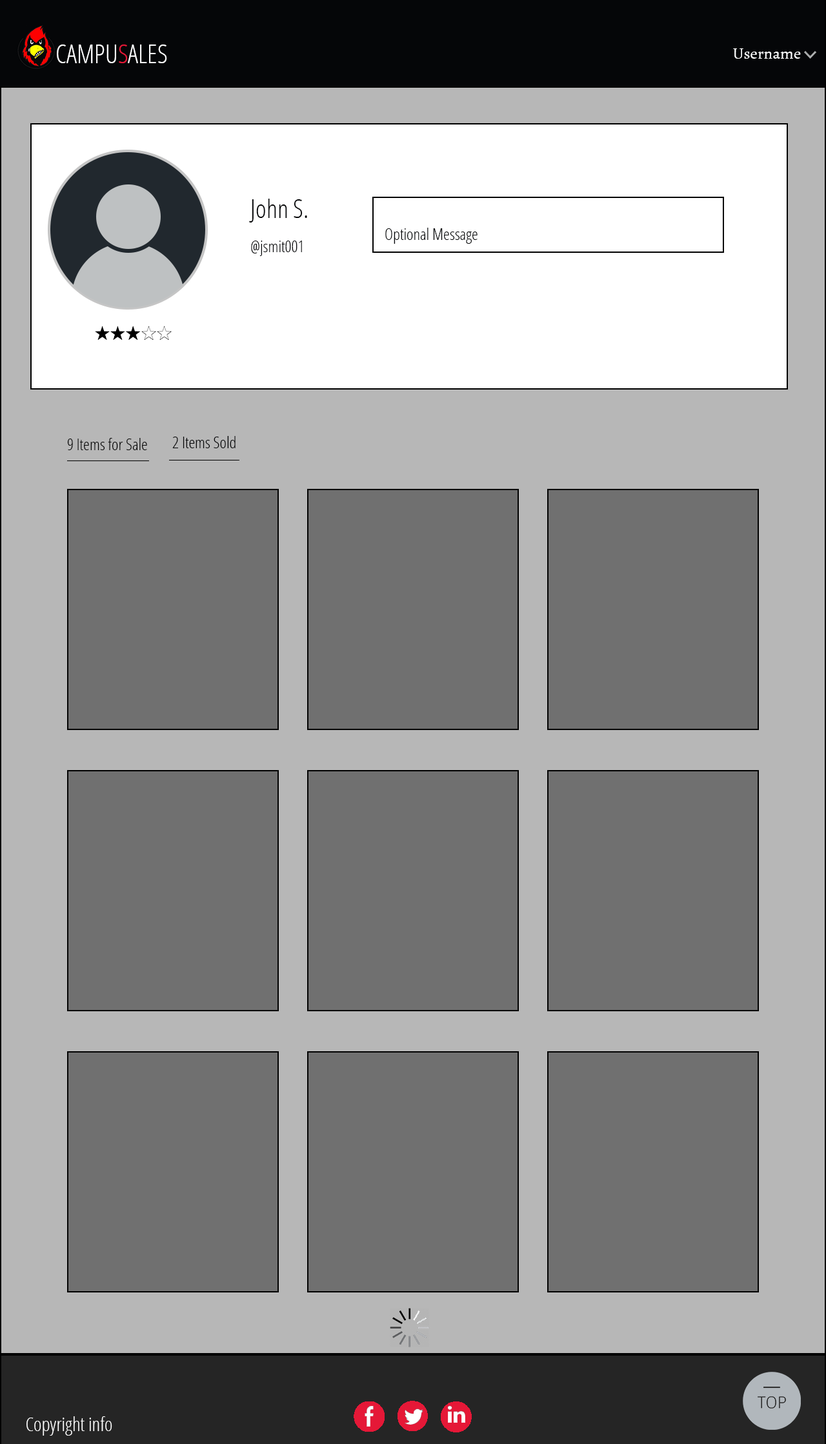
<style>
.page{position:relative;width:826px;height:1444px;background:#707070}
.page>*{position:absolute;margin:0}
.t1{font:25.8px "OpenSans-CondensedLight";color:#fefeff;text-transform:uppercase}
.t2{font:25.8px "OpenSans-CondensedLight";color:#e51837;text-transform:uppercase}
.t3{font:16.1px "Alegreya-Regular";color:#ffffff}
.t4{font:25.8px "OpenSans-CondensedLight";color:#050608}
.t5{font:16.1px "OpenSans-CondensedLight";color:#050608}
.t6{font:19.4px "OpenSans-CondensedLight";color:#ffffff}
</style>
<div class="page">
<p class="t1" style="left:57px;top:45px;width:110px;height:18px">Campu<span class="t2">s</span>ales</p>
<p class="t3" style="left:733px;top:48px;width:67px;height:11px">Username</p>
<p class="t4" style="left:249px;top:199px;width:58px;height:24px">John S.</p>
<p class="t5" style="left:385px;top:228px;width:92px;height:16px">Optional Message</p>
<p class="t5" style="left:251px;top:241px;width:51px;height:15px">@jsmit001</p>
<p class="t5" style="left:67px;top:438px;width:80px;height:12px">9 Items for Sale</p>
<p class="t5" style="left:172px;top:436px;width:63px;height:12px">2 Items Sold</p>
<p class="t6" style="left:26px;top:1417px;width:86px;height:19px">Copyright info</p>
</div>
